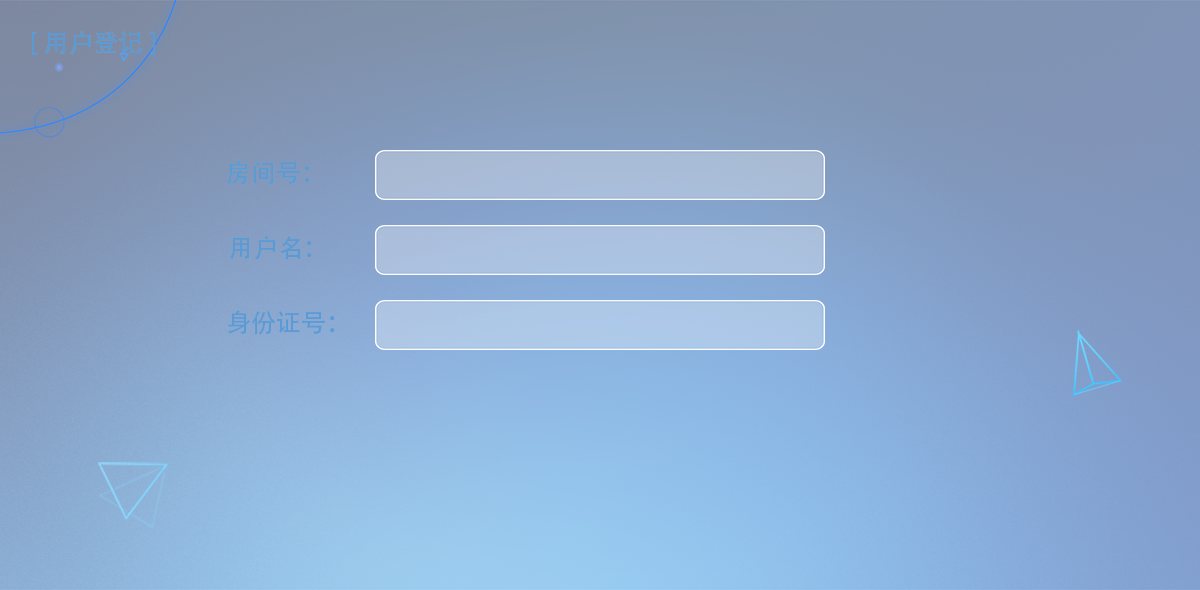
<style>
.page{position:relative;width:1200px;height:590px}
.page>*{position:absolute;margin:0}
.t1{font:25px "AdobeHeitiStd-Regular";color:#5b9bd5}
</style>
<div class="page">
<p class="t1" style="left:32px;top:31px;width:123px;height:24px">[ 用户登记 ]</p>
<p class="t1" style="left:227px;top:161px;width:83px;height:23px">房间号：</p>
<p class="t1" style="left:230px;top:236px;width:82px;height:24px">用户名：</p>
<p class="t1" style="left:227px;top:310px;width:108px;height:25px">身份证号：</p>
</div>
